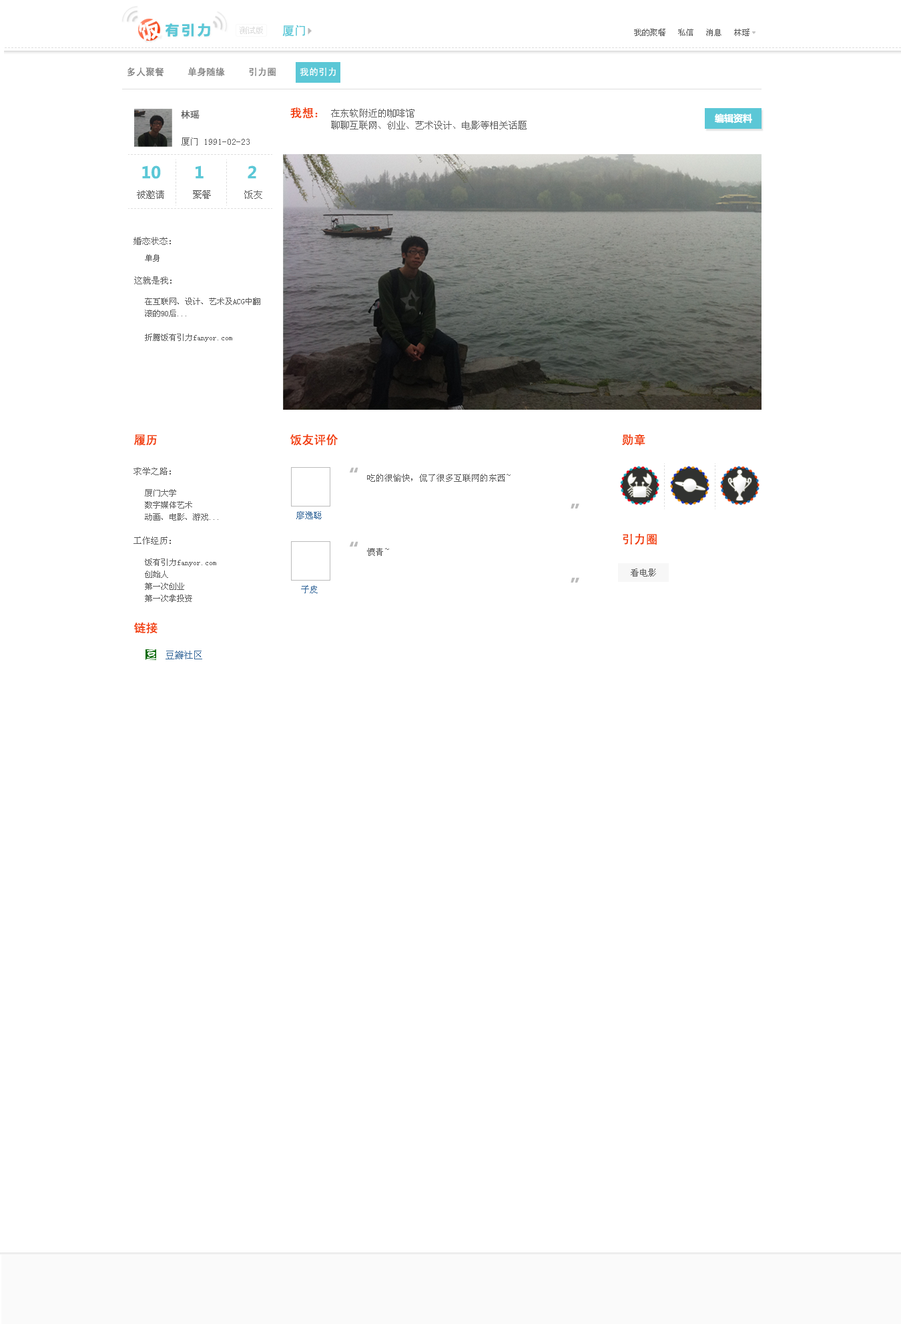
<style>
.page{position:relative;width:901px;height:1324px;background:#ffffff}
.page>*{position:absolute;margin:0}
.t1{font:20px "MicrosoftYaHei";letter-spacing:0.2em;color:#ffffff}
.t2{font:13.3px "MicrosoftYaHei";letter-spacing:0.2em;color:#5bc7d6}
.t3{font:12px "SimHei";color:#5bc7d6}
.t4{font:8px "SimSun";color:#5c5c5c}
.t5{font:9.3px "SimHei";color:#808080}
.t6{font:9.3px "SimHei";color:#ffffff}
.t7{font:9.3px "SimHei";color:#5c5c5c}
.t8{font:12px "SimHei";color:#f1390b}
.t9{font:9.3px/12px "SimSun";color:#5c5c5c}
.t10{font:9.3px "MicrosoftYaHei";color:#ffffff}
.t11{font:9.3px "MicrosoftYaHei"}
.t12{font:8.7px "SimSun";color:#5c5c5c}
.t13{font:16px "MicrosoftYaHei";color:#5bc7d6}
.t14{font:9.3px "SimSun";color:#5c5c5c}
.t15{font:8px/12px "SimSun";color:#5c5c5c}
.t16{font:8.7px "SimSun";color:#336699}
.t17{font:9.3px "SimSun";color:#336699}
</style>
<div class="page">
<p class="t1" style="left:139px;top:19px;width:22px;height:22px;rotate:-18deg">饭</p>
<p class="t2" style="left:165px;top:23px;width:45px;height:14px">有引力</p>
<p class="t3" style="left:282px;top:25px;width:23px;height:12px">厦门</p>
<p class="t4" style="left:634px;top:29px;width:115px;height:7px">我的聚餐   私信   消息   林瑶</p>
<p class="t5" style="left:127px;top:67px;width:209px;height:10px">多人聚餐     单身随缘     引力圈     <span class="t6">我的引力</span></p>
<p class="t7" style="left:181px;top:110px;width:19px;height:9px">林瑶</p>
<p class="t8" style="left:290px;top:107px;width:28px;height:11px">我想：</p>
<p class="t9" style="left:331px;top:109px;width:195px;height:20px">在东软附近的咖啡馆<br>聊聊互联网、创业、艺术设计、电影等相关话题</p>
<p class="t10" style="left:715px;top:113px;width:37px;height:10px">编辑资料</p>
<p class="t11" style="left:718px;top:113px;width:31px;height:10px">邀请TA</p>
<p class="t12" style="left:181px;top:137px;width:69px;height:8px">厦门 1991-02-23</p>
<p class="t13" style="left:142px;top:165px;width:114px;height:14px">10       1         2</p>
<p class="t14" style="left:137px;top:190px;width:125px;height:9px">被邀请      聚餐       饭友</p>
<p class="t12" style="left:133px;top:237px;width:38px;height:8px">婚恋状态:</p>
<p class="t4" style="left:145px;top:254px;width:14px;height:8px">单身</p>
<p class="t12" style="left:134px;top:276px;width:37px;height:8px">这就是我:</p>
<p class="t15" style="left:145px;top:298px;width:115px;height:44px">在互联网、设计、艺术及ACG中翻滚的90后...<br><br>折腾饭有引力fanyor.com</p>
<p class="t8" style="left:134px;top:434px;width:23px;height:12px">履历</p>
<p class="t8" style="left:290px;top:434px;width:48px;height:12px">饭友评价</p>
<p class="t8" style="left:622px;top:434px;width:23px;height:12px">勋章</p>
<p class="t12" style="left:133px;top:467px;width:38px;height:8px">求学之路:</p>
<p class="t12" style="left:367px;top:474px;width:143px;height:8px">吃的很愉快，侃了很多互联网的东西~</p>
<p class="t15" style="left:145px;top:489px;width:73px;height:31px">厦门大学<br>数字媒体艺术<br>动画、电影、游戏...</p>
<p class="t16" style="left:296px;top:511px;width:26px;height:8px">廖逸聪</p>
<p class="t8" style="left:623px;top:533px;width:34px;height:12px">引力圈</p>
<p class="t12" style="left:133px;top:536px;width:38px;height:8px">工作经历:</p>
<p class="t12" style="left:367px;top:548px;width:22px;height:8px">愤青~</p>
<p class="t15" style="left:145px;top:558px;width:71px;height:44px">饭有引力fanyor.com<br>创始人<br>第一次创业<br>第一次拿投资</p>
<p class="t12" style="left:631px;top:568px;width:25px;height:8px">看电影</p>
<p class="t16" style="left:301px;top:585px;width:17px;height:8px">子皮</p>
<p class="t8" style="left:134px;top:622px;width:23px;height:11px">链接</p>
<p class="t17" style="left:165px;top:651px;width:37px;height:8px">豆瓣社区</p>
</div>
